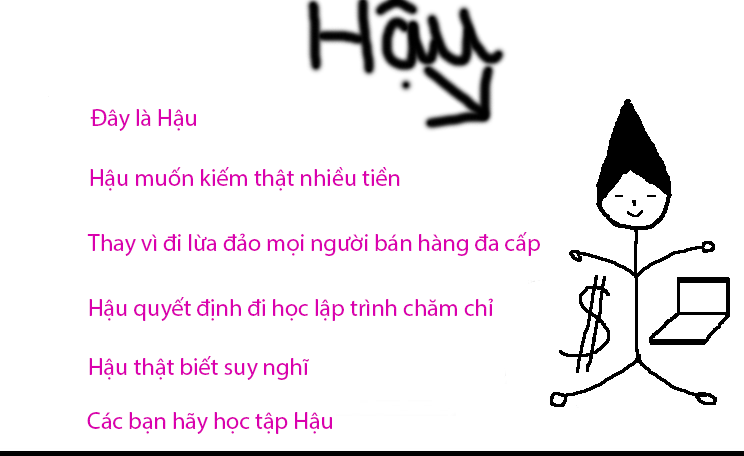
<style>
.page{position:relative;width:744px;height:456px;background:#ffffff}
.page>*{position:absolute;margin:0}
.t1{font:24px "MyriadPro-Regular";color:#da00ae}
</style>
<div class="page">
<p class="t1" style="left:90px;top:109px;width:106px;height:22px">Đây là Hậu</p>
<p class="t1" style="left:90px;top:167px;width:310px;height:24px">Hậu muốn kiếm thật nhiều tiền</p>
<p class="t1" style="left:87px;top:232px;width:453px;height:24px">Thay vì đi lừa đảo mọi người bán hàng đa cấp</p>
<p class="t1" style="left:89px;top:297px;width:404px;height:24px">Hậu quyết định đi học lập trình chăm chỉ</p>
<p class="t1" style="left:89px;top:356px;width:220px;height:24px">Hậu thật biết suy nghĩ</p>
<p class="t1" style="left:87px;top:412px;width:245px;height:22px">Các bạn hãy học tập Hậu</p>
</div>
